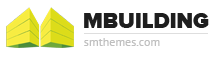
<style>
.page{position:relative;width:214px;height:57px;background:#ffffff}
.page>*{position:absolute;margin:0}
.t1{font:22px "jbmjelmjnedekkdjnkcjagmnjmidcegc";color:#1e1e1e;text-transform:uppercase}
.t2{font:12px "PTSans-Regular";color:#bfbfbf}
</style>
<div class="page">
<p class="t1" style="left:84px;top:13px;width:125px;height:15px">Mbuilding</p>
<p class="t2" style="left:84px;top:38px;width:76px;height:8px">smthemes.com</p>
</div>
